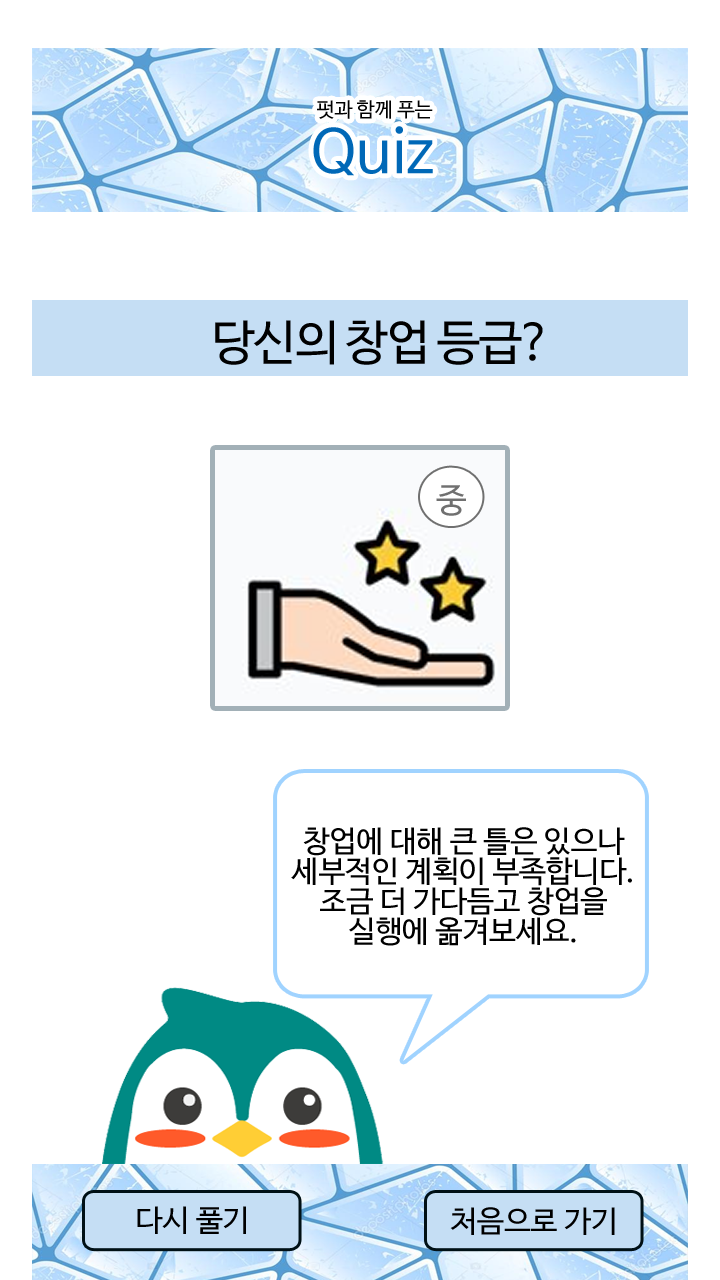
<style>
.page{position:relative;width:720px;height:1280px;background:#ffffff}
.page>*{position:absolute;margin:0}
.t1{font:20px/24px "NanumBarunGothic";color:#000000}
.t2{font:20px/26px "NanumBarunGothic";color:#000000}
.t3{font:60px/24px "NanumBarunGothic";color:#0068b7}
.t4{font:48px "NanumBarunGothic";letter-spacing:-0.03em;color:#000000}
.t5{font:34px "NanumBarunGothic";color:#707070}
.t6{font:30px/30px "NanumBarunGothic";color:#000000}
.t7{font:30px "NanumBarunGothic";color:#000000}
</style>
<div class="page">
<p class="t1" style="left:313px;top:100px;width:120px;height:76px;text-align:center"><span class="t2">  </span>펏과 함께 푸는 <br><span class="t3">Quiz</span></p>
<p class="t4" style="left:215px;top:320px;width:328px;height:45px">당신의 창업 등급?</p>
<p class="t5" style="left:436px;top:485px;width:30px;height:31px">중</p>
<p class="t6" style="left:291px;top:827px;width:341px;height:119px;text-align:center">창업에 대해 큰 틀은 있으나<br>세부적인 계획이 부족합니다.<br>조금 더 가다듬고 창업을<br>실행에 옮겨보세요.</p>
<p class="t7" style="left:137px;top:1206px;width:109px;height:28px">다시 풀기</p>
<p class="t7" style="left:450px;top:1207px;width:165px;height:28px">처음으로 가기</p>
</div>
